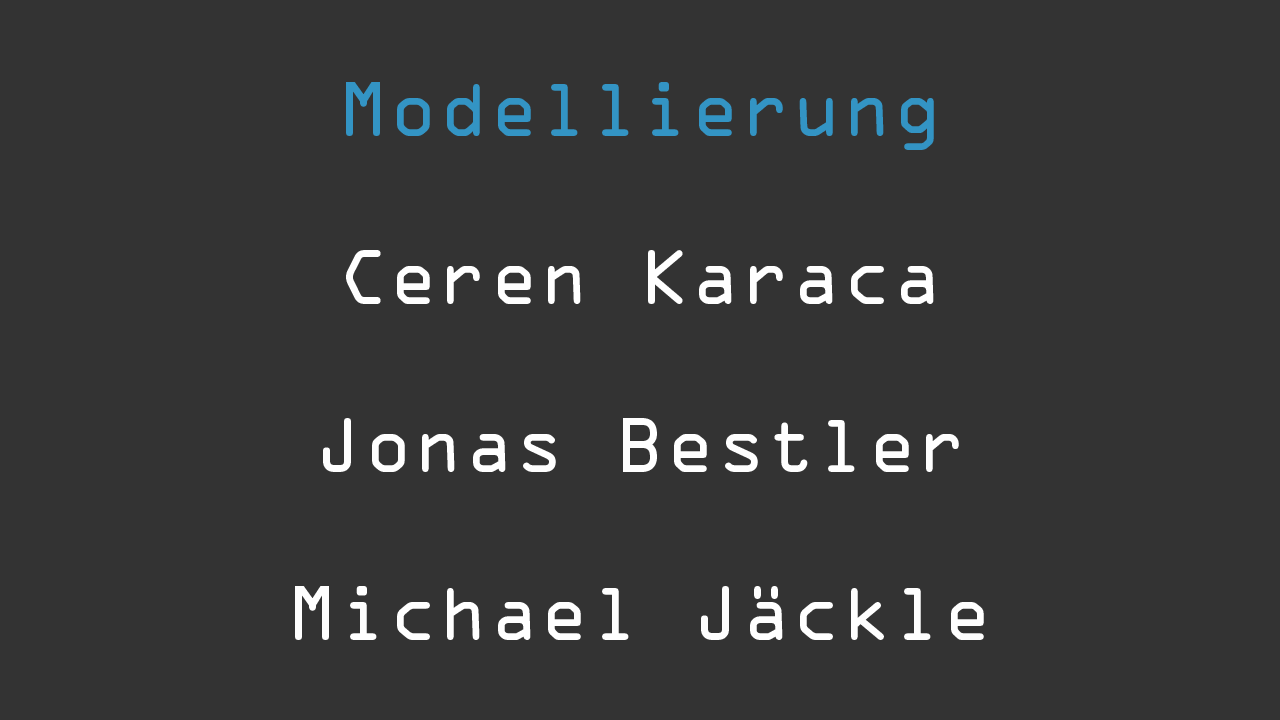
<style>
.page{position:relative;width:1280px;height:720px;background:#333333}
.page>*{position:absolute;margin:0}
.t1{font:70px "OCRAStd";color:#ffffff}
.t2{font:70px "OCRAStd";color:#3394c4}
</style>
<div class="page">
<p class="t1" style="left:295px;top:82px;width:689px;height:558px"><span class="t2"><br>Modellierung<br></span><br>Ceren Karaca<br><br>Jonas Bestler<br><br>Michael Jäckle</p>
</div>
